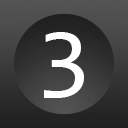
<style>
.page{position:relative;width:128px;height:128px}
.page>*{position:absolute;margin:0}
.t1{font:100px "Consolas";color:#ffffff}
</style>
<div class="page">
<p class="t1" style="left:44px;top:32px;width:40px;height:66px">3</p>
</div>
